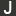
<style>
.page{position:relative;width:16px;height:16px;background:#353532}
.page>*{position:absolute;margin:0}
.t1{font:18px "ArialMT";color:#ffffff}
</style>
<div class="page">
<p class="t1" style="left:3px;top:1px;width:9px;height:13px">J</p>
</div>
